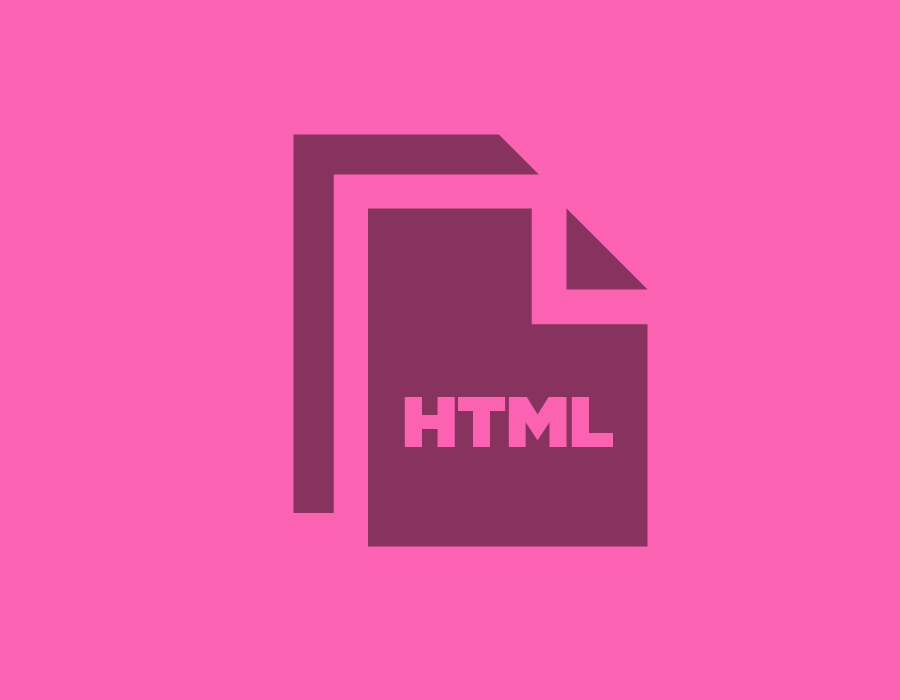
<style>
.page{position:relative;width:900px;height:700px;background:#fc62b2}
.page>*{position:absolute;margin:0}
.t1{font:72.3px "GothamUltra";color:#fc62b2}
</style>
<div class="page">
<p class="t1" style="left:404px;top:397px;width:209px;height:50px">HTML</p>
</div>
